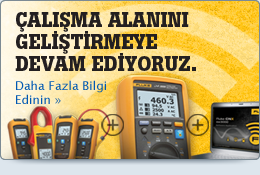
<style>
.page{position:relative;width:260px;height:175px}
.page>*{position:absolute;margin:0}
.t1{font:20px/22px "BotonPro-Bold";color:#231f20;text-transform:uppercase}
.t2{font:12px/9px "LucidaSans";color:#0058b3}
</style>
<div class="page">
<p class="t1" style="left:15px;top:12px;width:181px;height:59px">Çalışma alanını GELİŞTİRMEYE devam EDİYORUZ.</p>
<p class="t2" style="left:16px;top:80px;width:90px;height:24px">Daha Fazla Bilgi <br>Edinin »</p>
</div>
